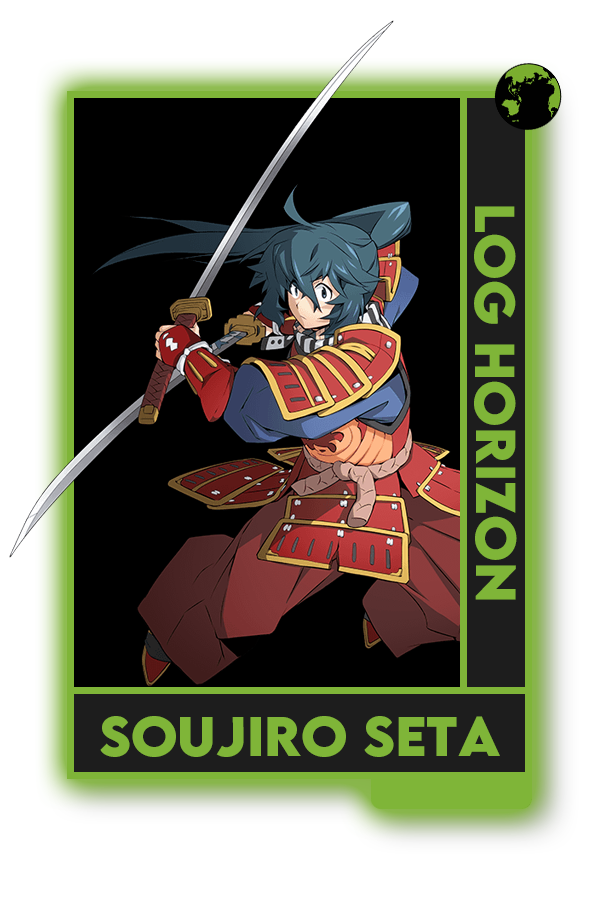
<style>
.page{position:relative;width:600px;height:900px;background:#000000}
.page>*{position:absolute;margin:0}
.t1{font:50px "LEMONMILK-Bold";color:#7fad41}
</style>
<div class="page">
<p class="t1" style="left:474px;top:206px;width:43px;height:394px;rotate:90deg">Log Horizon</p>
<p class="t1" style="left:100px;top:716px;width:400px;height:41px">Soujiro Seta</p>
</div>
